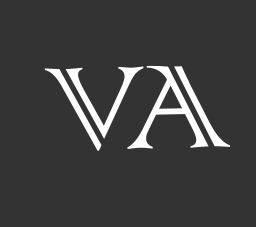
<style>
.page{position:relative;width:256px;height:227px;background:#333333}
.page>*{position:absolute;margin:0}
.t1{font:156.9px "ColonnaMT";color:#ffffff}
</style>
<div class="page">
<p class="t1" style="left:44px;top:65px;width:187px;height:86px;rotate:-1deg">VA</p>
</div>
